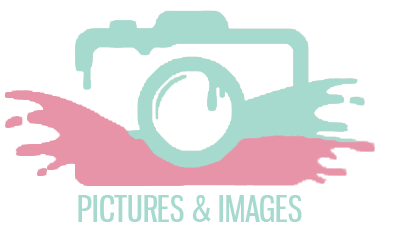
<style>
.page{position:relative;width:398px;height:232px;background:#ffffff}
.page>*{position:absolute;margin:0}
.t1{font:36px "GnuolaneRg-Regular";color:#a6dace}
</style>
<div class="page">
<p class="t1" style="left:78px;top:195px;width:224px;height:27px">PICTURES &amp; IMAGES</p>
</div>
